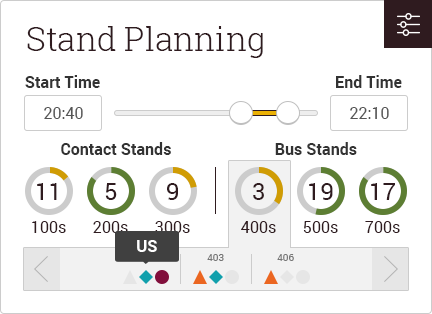
<style>
.page{position:relative;width:432px;height:314px;background:#ffffff}
.page>*{position:absolute;margin:0}
.t1{font:33px "RobotoSlab-Light";color:#2f1b1f}
.t2{font:16px "Roboto-Bold";color:#333333}
.t3{font:16px "Roboto-Regular";color:#555555}
.t4{font:24px "Roboto-Regular";color:#2f1b1f}
.t5{font:16px "Roboto-Regular";color:#2f1b1f}
.t6{font:16px "Roboto-Bold";color:#ffffff}
.t7{font:10px "Roboto-Regular";color:#767676}
</style>
<div class="page">
<p class="t1" style="left:27px;top:26px;width:236px;height:32px">Stand Planning</p>
<p class="t2" style="left:25px;top:75px;width:75px;height:13px">Start Time</p>
<p class="t2" style="left:336px;top:75px;width:66px;height:13px">End Time</p>
<p class="t3" style="left:44px;top:107px;width:39px;height:12px">20:40</p>
<p class="t3" style="left:350px;top:107px;width:39px;height:12px">22:10</p>
<p class="t2" style="left:61px;top:142px;width:110px;height:13px">Contact Stands</p>
<p class="t2" style="left:275px;top:142px;width:82px;height:13px">Bus Stands</p>
<p class="t4" style="left:37px;top:183px;width:20px;height:17px">11</p>
<p class="t4" style="left:105px;top:183px;width:12px;height:17px">5</p>
<p class="t4" style="left:167px;top:183px;width:11px;height:17px">9</p>
<p class="t4" style="left:253px;top:183px;width:11px;height:17px">3</p>
<p class="t4" style="left:309px;top:183px;width:24px;height:17px">19</p>
<p class="t4" style="left:371px;top:183px;width:24px;height:17px">17</p>
<p class="t5" style="left:32px;top:221px;width:34px;height:12px">100s</p>
<p class="t5" style="left:93px;top:221px;width:35px;height:12px">200s</p>
<p class="t5" style="left:155px;top:221px;width:35px;height:12px">300s</p>
<p class="t5" style="left:241px;top:221px;width:35px;height:12px">400s</p>
<p class="t5" style="left:303px;top:221px;width:35px;height:12px">500s</p>
<p class="t5" style="left:365px;top:221px;width:35px;height:12px">700s</p>
<p class="t6" style="left:137px;top:240px;width:20px;height:12px">US</p>
<p class="t7" style="left:207px;top:254px;width:17px;height:7px">403</p>
<p class="t7" style="left:277px;top:254px;width:17px;height:7px">406</p>
</div>
